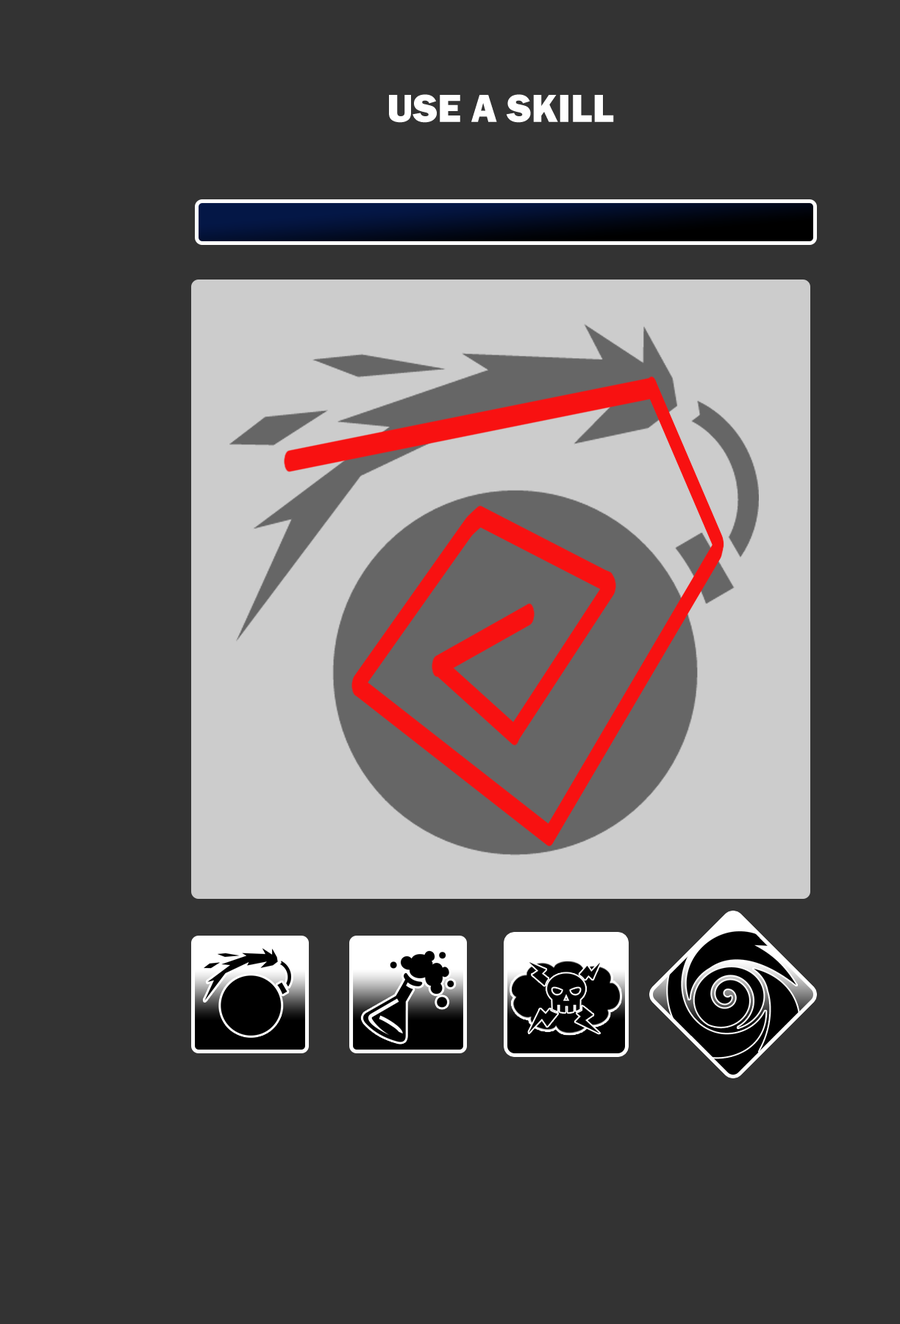
<style>
.page{position:relative;width:900px;height:1324px;background:#333333}
.page>*{position:absolute;margin:0}
.t1{font:40.5px "FranklinGothic-Heavy";color:#ffffff}
</style>
<div class="page">
<p class="t1" style="left:389px;top:94px;width:225px;height:29px">USE A SKILL</p>
</div>
